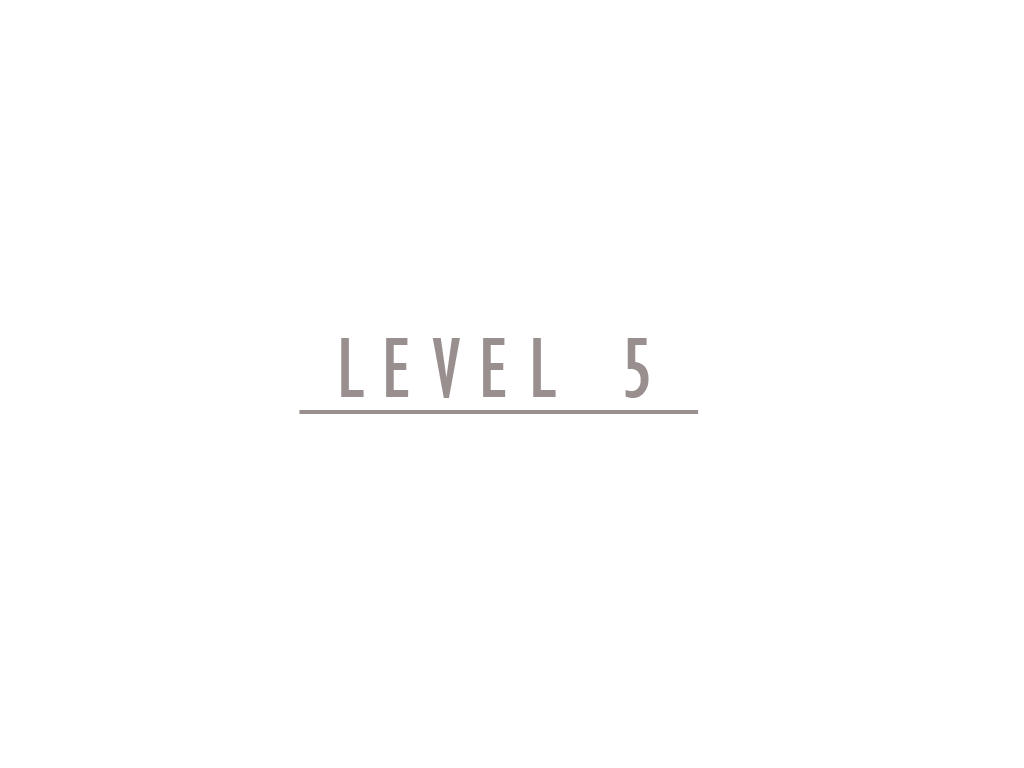
<style>
.page{position:relative;width:1024px;height:768px;background:#ffffff}
.page>*{position:absolute;margin:0}
.t1{font:89px "GillSansMT-Condensed";letter-spacing:0.2em;color:#998f8f}
.t2{font:89px "GillSansMT-Condensed";letter-spacing:0.2em;color:#998f8f;scale:8.75 1}
</style>
<div class="page">
<p class="t1" style="left:341px;top:338px;width:308px;height:60px">LEVEL 5</p>
<p class="t2" style="left:299px;top:410px;width:400px;height:4px">_</p>
</div>
